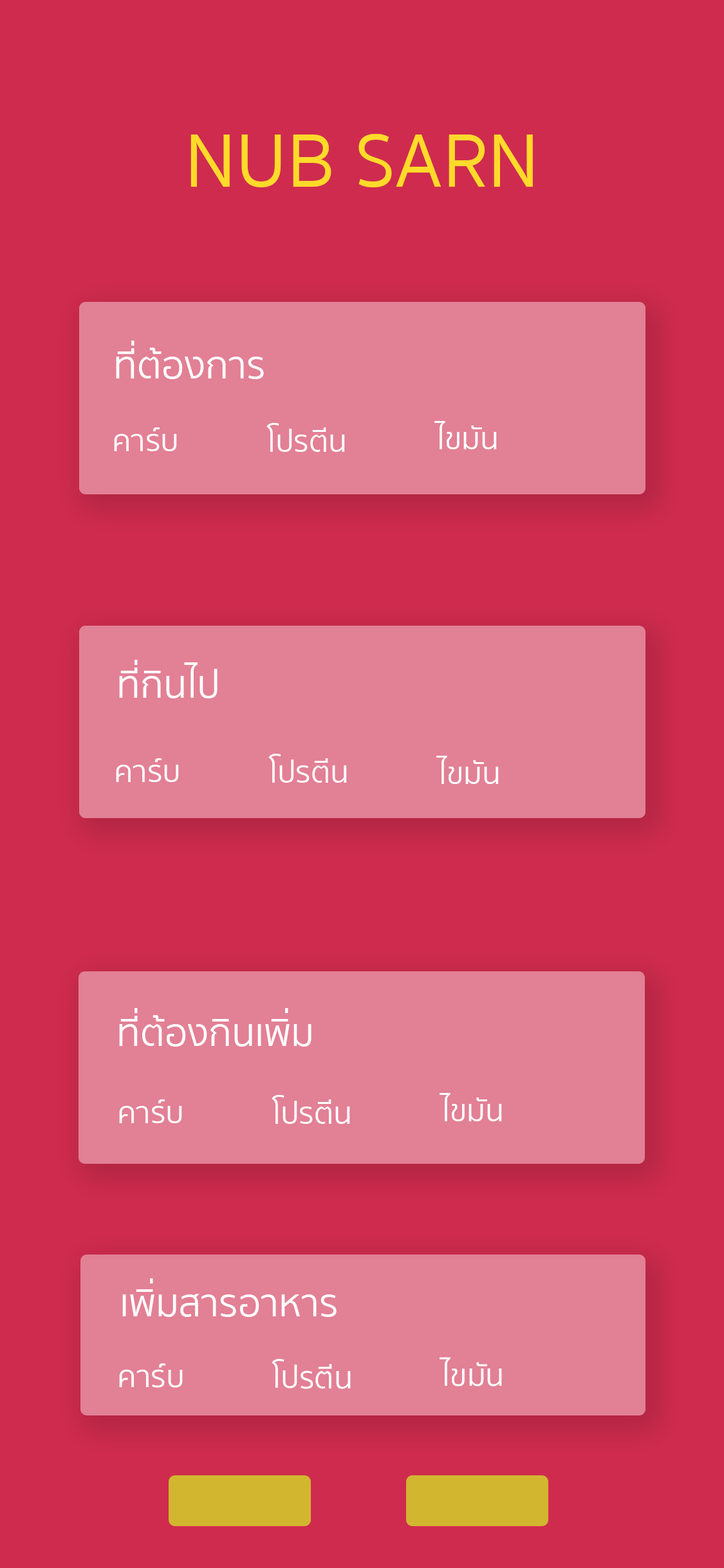
<style>
.page{position:relative;width:724px;height:1568px;background:#cf2b4e}
.page>*{position:absolute;margin:0}
.t1{font:77.2px "SukhumvitSet-Text";color:#ffda2a}
.t2{font:38.6px "SukhumvitSet-Text";color:#ffffff}
.t3{font:30.9px "SukhumvitSet-Text";color:#ffffff}
</style>
<div class="page">
<p class="t1" style="left:191px;top:134px;width:342px;height:53px">NUB SARN</p>
<p class="t2" style="left:116px;top:341px;width:148px;height:38px">ที่ต้องการ</p>
<p class="t3" style="left:266px;top:423px;width:79px;height:29px">โปรตีน</p>
<p class="t3" style="left:434px;top:421px;width:63px;height:28px">ไขมัน</p>
<p class="t3" style="left:114px;top:427px;width:63px;height:24px">คาร์บ</p>
<p class="t2" style="left:119px;top:660px;width:99px;height:38px">ที่กินไป</p>
<p class="t3" style="left:116px;top:758px;width:63px;height:24px">คาร์บ</p>
<p class="t3" style="left:268px;top:754px;width:79px;height:29px">โปรตีน</p>
<p class="t3" style="left:436px;top:756px;width:63px;height:28px">ไขมัน</p>
<p class="t2" style="left:119px;top:1008px;width:193px;height:39px">ที่ต้องกินเพิ่ม</p>
<p class="t3" style="left:272px;top:1095px;width:78px;height:29px">โปรตีน</p>
<p class="t3" style="left:440px;top:1093px;width:62px;height:28px">ไขมัน</p>
<p class="t3" style="left:119px;top:1099px;width:63px;height:24px">คาร์บ</p>
<p class="t2" style="left:122px;top:1278px;width:215px;height:39px">เพิ่มสารอาหาร</p>
<p class="t3" style="left:272px;top:1359px;width:79px;height:30px">โปรตีน</p>
<p class="t3" style="left:440px;top:1357px;width:62px;height:29px">ไขมัน</p>
<p class="t3" style="left:119px;top:1363px;width:64px;height:25px">คาร์บ</p>
</div>
